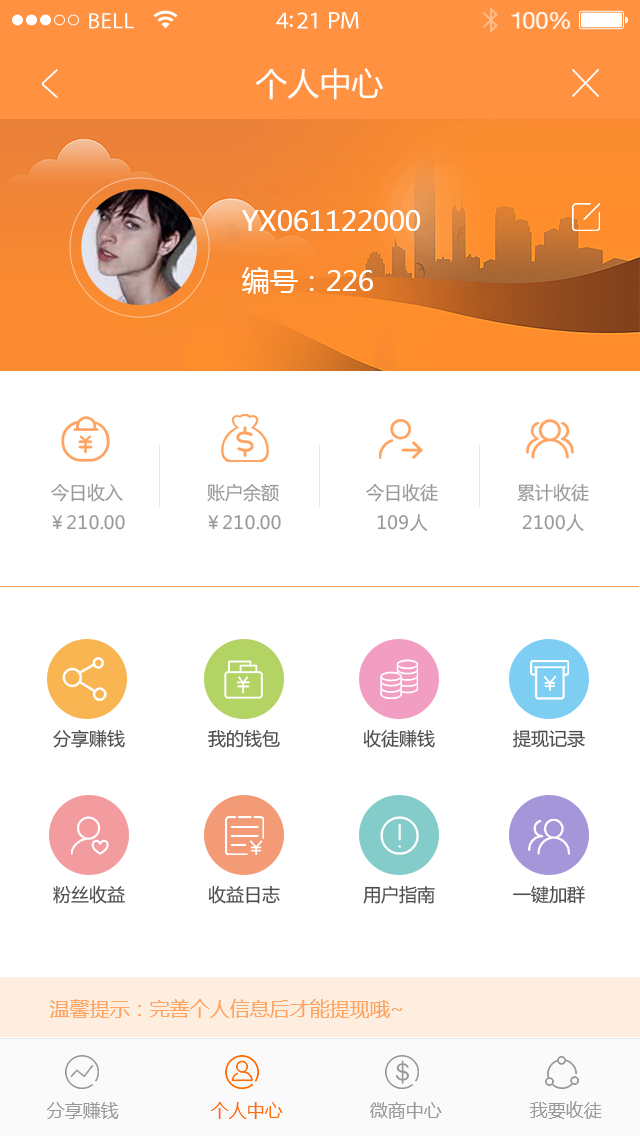
<style>
.page{position:relative;width:640px;height:1136px;background:#ffffff}
.page>*{position:absolute;margin:0}
.t1{font:22.4px "MyriadPro-Regular";letter-spacing:0.02em;color:#ffffff}
.t2{font:24.4px "MyriadPro-Regular";letter-spacing:-0.02em;color:#ffffff}
.t3{font:23.4px "HelveticaNeue";letter-spacing:-0.02em;color:#ffffff}
.t4{font:32px "MicrosoftYaHei";color:#ffffff}
.t5{font:28px/60px "MicrosoftYaHei";color:#ffffff}
.t6{font:18px/30px "MicrosoftYaHei";color:#999999}
.t7{font:18px "MicrosoftYaHei";color:#4d4d4d}
.t8{font:20px "MicrosoftYaHei";color:#fea463}
.t9{font:18px "MicrosoftYaHei";color:#999999}
.t10{font:18px "MicrosoftYaHei";color:#ff6b00}
</style>
<div class="page">
<p class="t1" style="left:89px;top:13px;width:45px;height:16px">BELL</p>
<p class="t2" style="left:276px;top:12px;width:83px;height:17px">4:21 PM</p>
<p class="t3" style="left:511px;top:12px;width:59px;height:17px">100%</p>
<p class="t4" style="left:255px;top:68px;width:128px;height:32px">个人中心</p>
<p class="t5" style="left:242px;top:210px;width:178px;height:84px">YX061122000<br>编号：226</p>
<p class="t6" style="left:51px;top:483px;width:74px;height:47px;text-align:center">今日收入<br>￥210.00</p>
<p class="t6" style="left:207px;top:484px;width:74px;height:46px;text-align:center">账户余额<br>￥210.00</p>
<p class="t6" style="left:366px;top:483px;width:72px;height:49px;text-align:center">今日收徒<br>109人</p>
<p class="t6" style="left:517px;top:483px;width:72px;height:49px;text-align:center">累计收徒<br>2100人</p>
<p class="t7" style="left:53px;top:730px;width:72px;height:18px">分享赚钱</p>
<p class="t7" style="left:208px;top:729px;width:72px;height:19px">我的钱包</p>
<p class="t7" style="left:363px;top:729px;width:72px;height:19px">收徒赚钱</p>
<p class="t7" style="left:513px;top:730px;width:72px;height:18px">提现记录</p>
<p class="t7" style="left:53px;top:885px;width:72px;height:19px">粉丝收益</p>
<p class="t7" style="left:208px;top:885px;width:72px;height:19px">收益日志</p>
<p class="t7" style="left:363px;top:885px;width:72px;height:19px">用户指南</p>
<p class="t7" style="left:513px;top:885px;width:72px;height:19px">一键加群</p>
<p class="t8" style="left:50px;top:999px;width:353px;height:20px">温馨提示：完善个人信息后才能提现哦~</p>
<p class="t9" style="left:47px;top:1102px;width:72px;height:17px">分享赚钱</p>
<p class="t10" style="left:211px;top:1102px;width:72px;height:17px">个人中心</p>
<p class="t9" style="left:370px;top:1102px;width:72px;height:17px">微商中心</p>
<p class="t9" style="left:529px;top:1101px;width:73px;height:18px">我要收徒</p>
</div>
